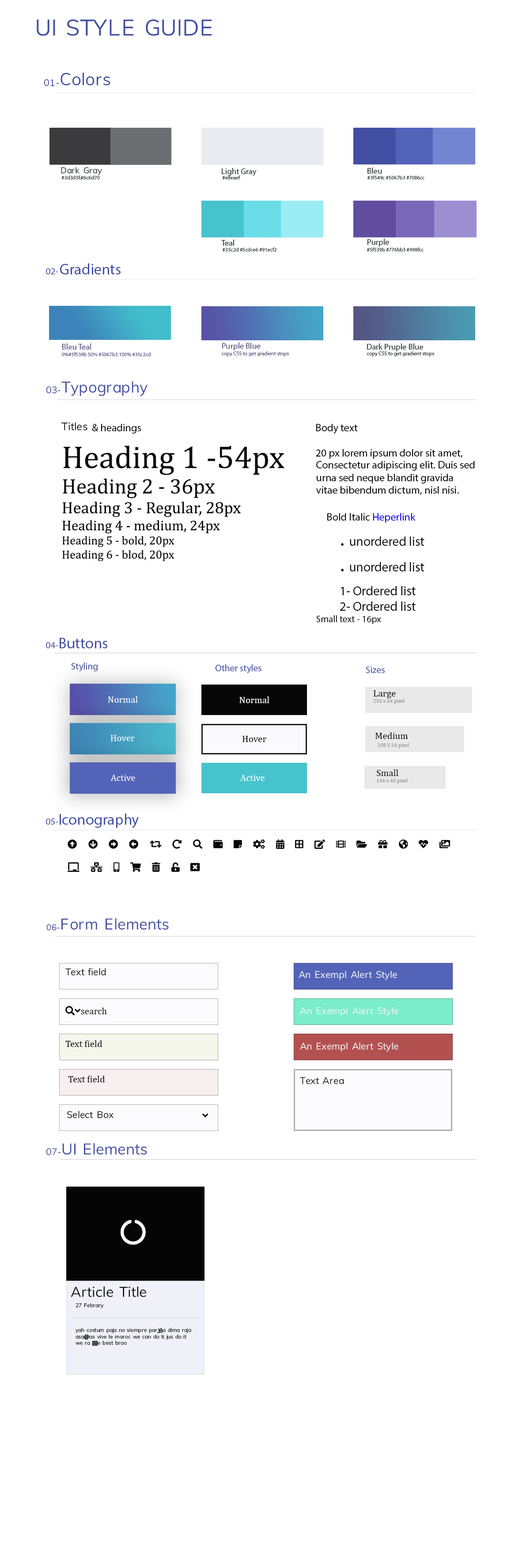
<style>
.page{position:relative;width:530px;height:1568px;background:#ffffff}
.page>*{position:absolute;margin:0}
.t1{font:8.2px "MyriadPro-Regular";color:#282d2e}
.t2{font:5.3px "MyriadPro-Regular";color:#282d2e}
.t3{font:15.3px "MyriadPro-Regular";color:#424ea2}
.t4{font:9.4px "MyriadPro-Regular";color:#424ea2}
.t5{font:5.3px "MyriadPro-Regular";color:#555382}
.t6{font:8.2px "MyriadPro-Regular";color:#555382}
.t7{font:10.6px "MyriadPro-Regular";color:#0b0b0c}
.t8{font:10.6px "FontAwesome5Free-Solid";color:#0b0b0c}
.t9{font:11.8px "Cambria";color:#0b0b0c}
.t10{font:31.8px "Cambria";color:#0b0b0c}
.t11{font:21.2px "Cambria";color:#0b0b0c}
.t12{font:16.5px "Cambria";color:#0b0b0c}
.t13{font:14.1px "Cambria";color:#0b0b0c}
.t14{font:13px "MyriadPro-Regular";color:#0b0b0c}
.t15{font:10.6px "MyriadPro-Regular";color:#1308ec}
.t16{font:21.2px "MyriadPro-Regular";color:#0b0b0c}
.t17{font:9.4px "MyriadPro-Regular";color:#0b0b0c}
.t18{font:9.4px "Cambria";color:#f7f8fc}
.t19{font:9.4px "Cambria";color:#fefefe}
.t20{font:5.3px "Cambria";color:#959090}
.t21{font:9.4px "Cambria";color:#0e0d0d}
.t22{font:9.4px "Cambria";color:#0c0c0c}
</style>
<div class="page">
<p class="t1" style="left:222px;top:168px;width:35px;height:8px">Light Gray</p>
<p class="t1" style="left:368px;top:167px;width:14px;height:7px">Bleu</p>
<p class="t2" style="left:61px;top:175px;width:39px;height:5px">#3d3d3f,#6c6d70</p>
<p class="t2" style="left:222px;top:175px;width:18px;height:4px">#e8eaef</p>
<p class="t2" style="left:368px;top:175px;width:57px;height:4px">#3f549c #5067b3 #7086cc</p>
<p class="t1" style="left:221px;top:240px;width:13px;height:6px">Teal</p>
<p class="t2" style="left:367px;top:239px;width:57px;height:12px"><span class="t1">Purple<br></span>#5f539b #776bb3 #998fcc</p>
<p class="t2" style="left:223px;top:247px;width:54px;height:4px">#35c2d #5cdce6 #91ecf2</p>
<p class="t3" style="left:46px;top:263px;width:75px;height:11px"><span class="t4">02- </span>Gradients</p>
<p class="t5" style="left:62px;top:343px;width:89px;height:13px"><span class="t6">Bleu Teal <br></span>0%#5f539b 50% #5067b3 100% #35c2cd</p>
<p class="t5" style="left:222px;top:343px;width:67px;height:14px"><span class="t6">Purple Blue<br></span>copy CSS to get gradient stops</p>
<p class="t1" style="left:367px;top:343px;width:56px;height:8px">Dark Pruple Blue</p>
<p class="t2" style="left:367px;top:351px;width:67px;height:6px">copy CSS to get gradient stops</p>
<p class="t7" style="left:61px;top:422px;width:80px;height:12px"><span class="t8">Titles </span>&amp; headings</p>
<p class="t7" style="left:316px;top:424px;width:147px;height:35px">Body text<br><br>20 px lorem ipsum dolor sit amet,</p>
<p class="t9" style="left:62px;top:445px;width:223px;height:116px"><span class="t10">Heading 1 -54px<br></span><span class="t11">Heading 2 - 36px<br></span><span class="t12">Heading 3 - Regular, 28px<br></span><span class="t13">Heading 4 - medium, 24px<br></span>Heading 5 - bold, 20px<br>Heading 6 - blod, 20px</p>
<p class="t7" style="left:316px;top:461px;width:159px;height:34px">Consectetur adipiscing elit. Duis sed<br>urna sed neque blandit gravida<br>vitae bibendum dictum, nisl nisi.</p>
<p class="t14" style="left:327px;top:513px;width:98px;height:58px"><span class="t7">Bold Italic </span><span class="t15">Heperlink<br>      </span><span class="t16">. </span>unordered list<br>      <span class="t16">. </span>unordered list</p>
<p class="t14" style="left:340px;top:586px;width:76px;height:25px">1- Ordered list<br>2- Ordered list</p>
<p class="t17" style="left:316px;top:615px;width:65px;height:9px">Small text - 16px</p>
<p class="t3" style="left:46px;top:638px;width:61px;height:10px"><span class="t4">04-</span>Buttons</p>
<p class="t4" style="left:71px;top:662px;width:27px;height:10px">Styling</p>
<p class="t4" style="left:215px;top:664px;width:47px;height:10px">Other styles</p>
<p class="t4" style="left:366px;top:666px;width:19px;height:7px">Sizes</p>
<p class="t18" style="left:108px;top:696px;width:30px;height:7px">Normal</p>
<p class="t19" style="left:240px;top:696px;width:30px;height:7px">Normal</p>
<p class="t20" style="left:373px;top:690px;width:32px;height:14px"><span class="t21">Large<br></span>256 x 64 pixel</p>
<p class="t18" style="left:110px;top:735px;width:25px;height:6px">Hover</p>
<p class="t21" style="left:243px;top:736px;width:23px;height:6px">Hover</p>
<p class="t21" style="left:376px;top:732px;width:32px;height:7px">Medium</p>
<p class="t20" style="left:377px;top:743px;width:33px;height:5px">208 X 56 pixel</p>
<p class="t20" style="left:377px;top:769px;width:31px;height:15px"><span class="t21">Small<br></span>144 x 40 pixel</p>
<p class="t18" style="left:110px;top:775px;width:25px;height:6px">Active</p>
<p class="t19" style="left:240px;top:775px;width:25px;height:6px">Active</p>
<p class="t3" style="left:46px;top:814px;width:93px;height:14px"><span class="t4">05-</span>Iconography</p>
<p class="t22" style="left:65px;top:1040px;width:38px;height:7px">Text field</p>
<p class="t22" style="left:68px;top:1076px;width:37px;height:6px">Text field</p>
</div>
